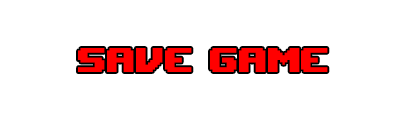
<style>
.page{position:relative;width:406px;height:119px;background:#ffffff}
.page>*{position:absolute;margin:0}
.t1{font:48px "UpheavalTT-BRK-";color:#ff0000}
</style>
<div class="page">
<p class="t1" style="left:78px;top:48px;width:250px;height:24px">save GAME</p>
</div>
